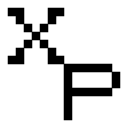
<style>
.page{position:relative;width:128px;height:128px;background:#ffffff}
.page>*{position:absolute;margin:0}
.t1{font:64px "PokemonGB";color:#000000}
</style>
<div class="page">
<p class="t1" style="left:7px;top:7px;width:58px;height:58px">X</p>
<p class="t1" style="left:63px;top:63px;width:58px;height:58px">P</p>
</div>
